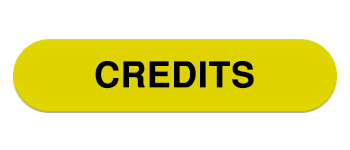
<style>
.page{position:relative;width:350px;height:150px;background:#ffffff}
.page>*{position:absolute;margin:0}
.t1{font:35.3px "SansSerifBold";color:#000000;font-weight:bold}
</style>
<div class="page">
<p class="t1" style="left:95px;top:61px;width:159px;height:28px">CREDITS</p>
</div>
